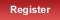
<style>
.page{position:relative;width:60px;height:20px}
.page>*{position:absolute;margin:0}
.t1{font:10px "Arial-BoldMT";color:#ffffff}
</style>
<div class="page">
<p class="t1" style="left:10px;top:5px;width:41px;height:10px">Register</p>
</div>
